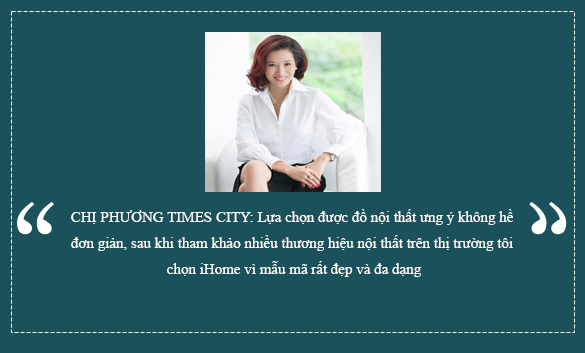
<style>
.page{position:relative;width:585px;height:353px;background:#1b515b}
.page>*{position:absolute;margin:0}
.t1{font:15px/26px "TimesNewRomanPSMT";color:#ffffff}
</style>
<div class="page">
<p class="t1" style="left:71px;top:209px;width:442px;height:68px;text-align:center">CHỊ PHƯƠNG TIMES CITY: Lựa chọn được đồ nội thất ưng ý không hề <br>đơn giản, sau khi tham khảo nhiều thương hiệu nội thất trên thị trường tôi <br>chọn iHome vì mẫu mã rất đẹp và đa dạng</p>
</div>
